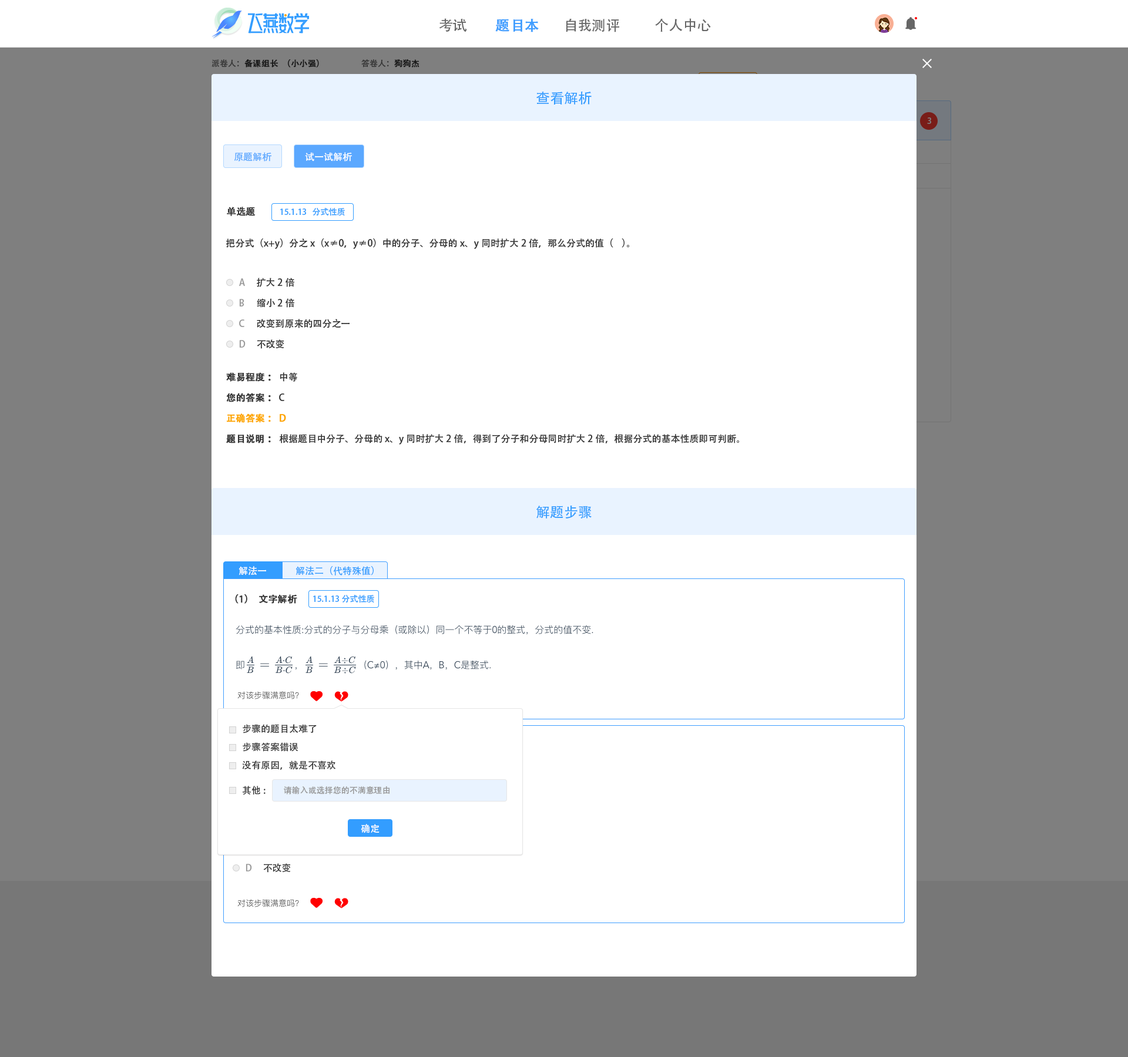
<style>
.page{position:relative;width:1128px;height:1057px;background:#ffffff}
.page>*{position:absolute;margin:0}
.t1{font:14.1px "AdobeHeitiStd-Regular";color:#666666}
.t2{font:14.1px "AdobeHeitiStd-Regular";color:#409eff;font-weight:bold}
.t3{font:8.2px "AdobeHeitiStd-Regular";color:#191919;font-weight:bold}
.t4{font:8.2px "AdobeHeitiStd-Regular";color:#191919}
.t5{font:8.2px "AdobeHeitiStd-Regular"}
.t6{font:8.2px "AdobeHeitiStd-Regular";font-weight:bold}
.t7{font:14.1px "AdobeHeitiStd-Regular";color:#339dff}
.t8{font:8.2px "AdobeHeitiStd-Regular";color:#7f7f7f}
.t9{font:9.4px "AdobeHeitiStd-Regular";color:#5ba8ff}
.t10{font:9.4px "AdobeHeitiStd-Regular";color:#ffffff}
.t11{font:9.4px "AdobeHeitiStd-Regular";color:#333333;font-weight:bold}
.t12{font:8.2px "AdobeHeitiStd-Regular";color:#339dff}
.t13{font:9.4px "AdobeHeitiStd-Regular";color:#333333}
.t14{font:9.4px "AdobeHeitiStd-Regular";color:#999999}
.t15{font:9.4px "AdobeHeitiStd-Regular";color:#fea300;font-weight:bold}
.t16{font:9.4px "AdobeHeitiStd-Regular";color:#339dff}
.t17{font:8.2px "AdobeHeitiStd-Regular";color:#999999}
</style>
<div class="page">
<p class="t1" style="left:439px;top:18px;width:28px;height:14px">考试</p>
<p class="t2" style="left:495px;top:19px;width:44px;height:13px">题目本</p>
<p class="t1" style="left:566px;top:18px;width:53px;height:14px">自我测评</p>
<p class="t1" style="left:655px;top:18px;width:56px;height:14px">个人中心</p>
<p class="t3" style="left:211px;top:59px;width:108px;height:9px"><span class="t4">派卷人：</span>备课组长（小小强）</p>
<p class="t5" style="left:361px;top:59px;width:58px;height:9px">答卷人：<span class="t6">狗狗杰</span></p>
<p class="t7" style="left:536px;top:92px;width:56px;height:13px">查看解析</p>
<p class="t8" style="left:927px;top:117px;width:4px;height:7px">3</p>
<p class="t9" style="left:234px;top:152px;width:37px;height:10px">原题解析</p>
<p class="t10" style="left:305px;top:152px;width:47px;height:10px">试一试解析</p>
<p class="t11" style="left:227px;top:207px;width:29px;height:9px">单选题</p>
<p class="t12" style="left:280px;top:208px;width:65px;height:8px">15.1.13   分式性质</p>
<p class="t13" style="left:226px;top:238px;width:403px;height:11px">把分式（x+y）分之x（x≠0，y≠0）中的分子、分母的x、y同时扩大2倍，那么分式的值（    ）。</p>
<p class="t14" style="left:239px;top:278px;width:6px;height:8px">A</p>
<p class="t13" style="left:257px;top:278px;width:37px;height:9px">扩大2倍</p>
<p class="t14" style="left:239px;top:299px;width:5px;height:8px">B</p>
<p class="t13" style="left:257px;top:298px;width:37px;height:10px">缩小2倍</p>
<p class="t14" style="left:239px;top:320px;width:5px;height:7px">C</p>
<p class="t13" style="left:257px;top:319px;width:92px;height:9px">改变到原来的四分之一</p>
<p class="t14" style="left:239px;top:340px;width:7px;height:8px">D</p>
<p class="t13" style="left:257px;top:340px;width:27px;height:9px">不改变</p>
<p class="t11" style="left:226px;top:372px;width:71px;height:10px">难易程度：<span class="t13"> 中等</span></p>
<p class="t11" style="left:226px;top:393px;width:58px;height:9px">您的答案：<span class="t13"> C</span></p>
<p class="t15" style="left:227px;top:414px;width:59px;height:9px">正确答案： D</p>
<p class="t13" style="left:226px;top:434px;width:513px;height:11px"><span class="t11">题目说明： </span>根据题目中分子、分母的x、y同时扩大2倍，得到了分子和分母同时扩大2倍，根据分式的基本性质即可判断。</p>
<p class="t7" style="left:536px;top:506px;width:56px;height:13px">解题步骤</p>
<p class="t10" style="left:238px;top:566px;width:28px;height:10px">解法一</p>
<p class="t16" style="left:295px;top:566px;width:79px;height:10px">解法二（代特殊值）</p>
<p class="t11" style="left:235px;top:594px;width:62px;height:10px">（1）文字解析</p>
<p class="t12" style="left:313px;top:595px;width:61px;height:8px">15.1.13分式性质</p>
<p class="t13" style="left:243px;top:724px;width:74px;height:10px">步骤的题目太难了</p>
<p class="t13" style="left:243px;top:742px;width:55px;height:10px">步骤答案错误</p>
<p class="t13" style="left:242px;top:761px;width:93px;height:9px">没有原因，就是不喜欢</p>
<p class="t13" style="left:243px;top:786px;width:23px;height:9px">其他:</p>
<p class="t17" style="left:284px;top:786px;width:106px;height:9px">请输入或选择您的不满意理由</p>
<p class="t10" style="left:361px;top:824px;width:18px;height:10px">确定</p>
<p class="t14" style="left:246px;top:864px;width:6px;height:8px">D</p>
<p class="t13" style="left:263px;top:863px;width:28px;height:10px">不改变</p>
</div>
